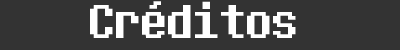
<style>
.page{position:relative;width:400px;height:50px;background:#333333}
.page>*{position:absolute;margin:0}
.t1{font:48.7px "DeterminationSans";color:#ffffff}
</style>
<div class="page">
<p class="t1" style="left:90px;top:1px;width:206px;height:37px">Créditos</p>
</div>
